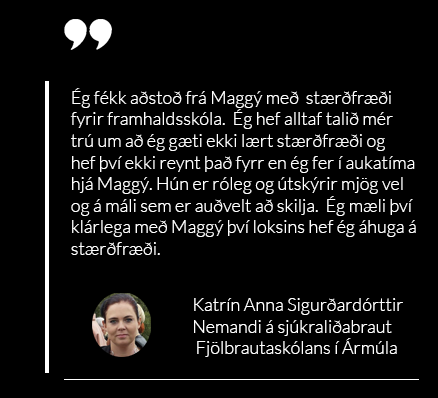
<style>
.page{position:relative;width:438px;height:398px;background:#000000}
.page>*{position:absolute;margin:0}
.t1{font:18px "Lato-Light";color:#ffffff}
</style>
<div class="page">
<p class="t1" style="left:70px;top:88px;width:346px;height:167px">Ég fékk aðstoð frá Maggý með  stærðfræði <br>fyrir framhaldsskóla.  Ég hef alltaf talið mér <br>trú um að ég gæti ekki lært stærðfræði og <br>hef því ekki reynt það fyrr en ég fer í aukatíma <br>hjá Maggý. Hún er róleg og útskýrir mjög vel <br>og á máli sem er auðvelt að skilja.  Ég mæli því <br>klárlega með Maggý því loksins hef ég áhuga á <br>stærðfræði.</p>
<p class="t1" style="left:194px;top:298px;width:209px;height:59px">Katrín Anna Sigurðardórttir<br>   Nemandi á sjúkraliðabraut<br>    Fjölbrautaskólans í Ármúla</p>
</div>
